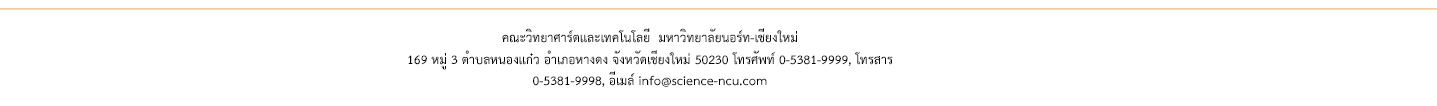
<style>
.page{position:relative;width:1437px;height:106px;background:#ffffff}
.page>*{position:absolute;margin:0}
.t1{font:18px "THSarabunPSK-Bold";color:#050505}
</style>
<div class="page">
<p class="t1" style="left:408px;top:28px;width:485px;height:59px;text-align:center">คณะวิทยาศาร์ตและเทคโนโลยี  มหาวิทยาลัยนอร์ท-เชียงใหม่ <br>169 หมู่ 3 ตำบลหนองแก๋ว อำเภอหางดง จังหวัดเชียงใหม่ 50230 โทรศัพท์ 0-5381-9999, โทรสาร 0-5381-9998, อีเมล์ info@science-ncu.com</p>
</div>
